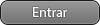
<style>
.page{position:relative;width:100px;height:25px}
.page>*{position:absolute;margin:0}
.t1{font:14px "MyriadPro-Regular";color:#fefefe}
</style>
<div class="page">
<p class="t1" style="left:33px;top:7px;width:35px;height:10px">Entrar</p>
</div>
